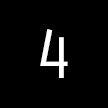
<style>
.page{position:relative;width:108px;height:108px;background:#000000}
.page>*{position:absolute;margin:0}
.t1{font:72px "OratorStd";color:#ffffff}
</style>
<div class="page">
<p class="t1" style="left:40px;top:29px;width:28px;height:49px">4</p>
</div>
